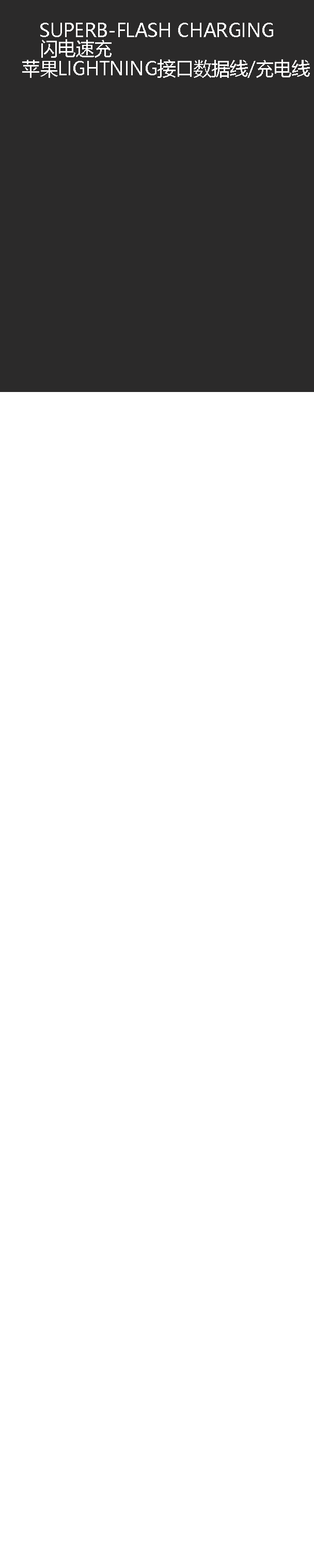
<style>
.page{position:relative;width:314px;height:1568px;background:#ffffff}
.page>*{position:absolute;margin:0}
.t1{font:18.6px "MicrosoftYaHei";color:#ffffff;scale:0.97 1}
</style>
<div class="page">
<p class="t1" style="left:40px;top:23px;width:233px;height:14px">SUPERB-FLASH CHARGING</p>
<p class="t1" style="left:41px;top:39px;width:70px;height:19px">闪电速充</p>
<p class="t1" style="left:22px;top:59px;width:287px;height:19px">苹果LIGHTNING接口数据线/充电线</p>
</div>
